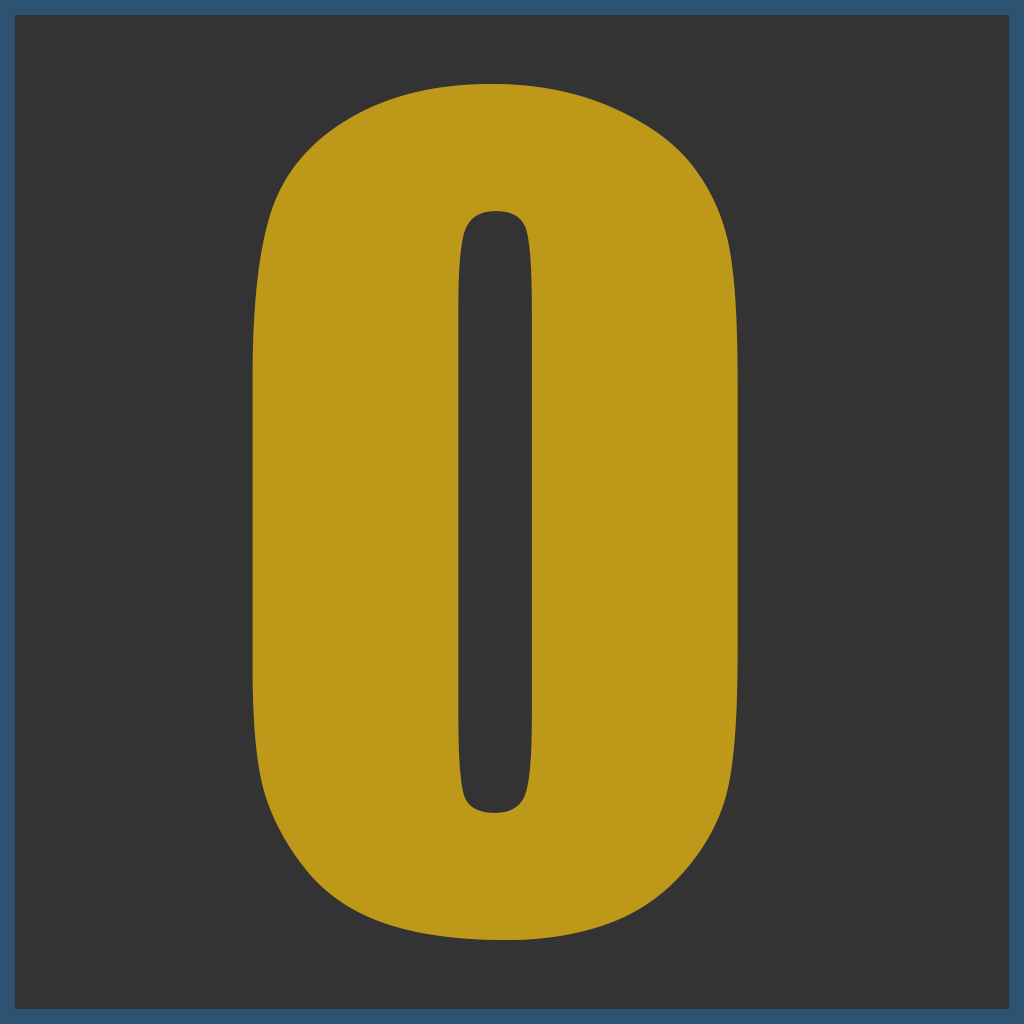
<style>
.page{position:relative;width:1024px;height:1024px;background:#333333}
.page>*{position:absolute;margin:0}
.t1{font:1041.7px "Impact";color:#be9919}
</style>
<div class="page">
<p class="t1" style="left:252px;top:84px;width:486px;height:856px">0</p>
</div>
